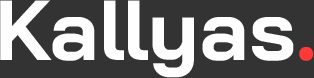
<style>
.page{position:relative;width:314px;height:78px;background:#333333}
.page>*{position:absolute;margin:0}
.t1{font:85px "BaiJamjuree-Bold";color:#fefefe}
.t2{font:85px "BaiJamjuree-Bold";color:#ff3838}
</style>
<div class="page">
<p class="t1" style="left:0px;top:0px;width:314px;height:78px">Kallyas<span class="t2">.</span></p>
</div>
